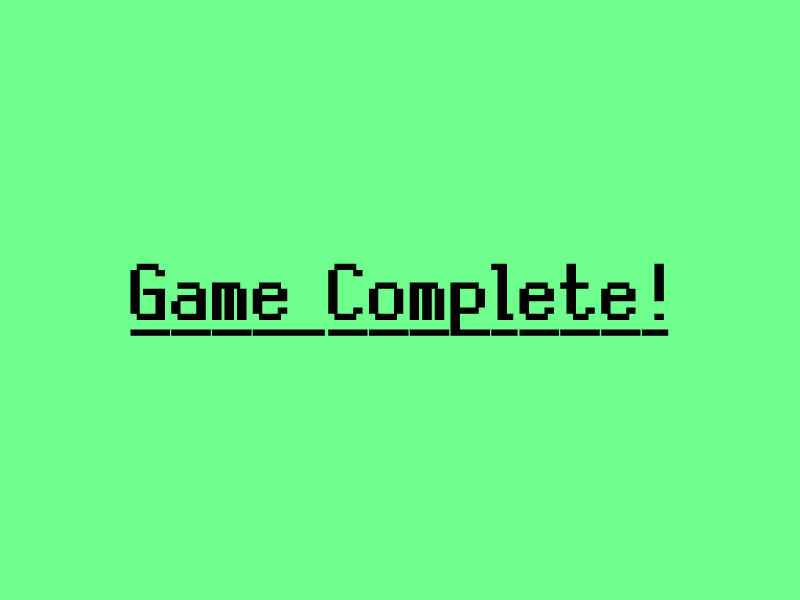
<style>
.page{position:relative;width:800px;height:600px;background:#6eff8d}
.page>*{position:absolute;margin:0}
.t1{font:119px "Silver";color:#000000;font-weight:bold;text-decoration:underline}
</style>
<div class="page">
<p class="t1" style="left:130px;top:263px;width:539px;height:73px">Game Complete!</p>
</div>
